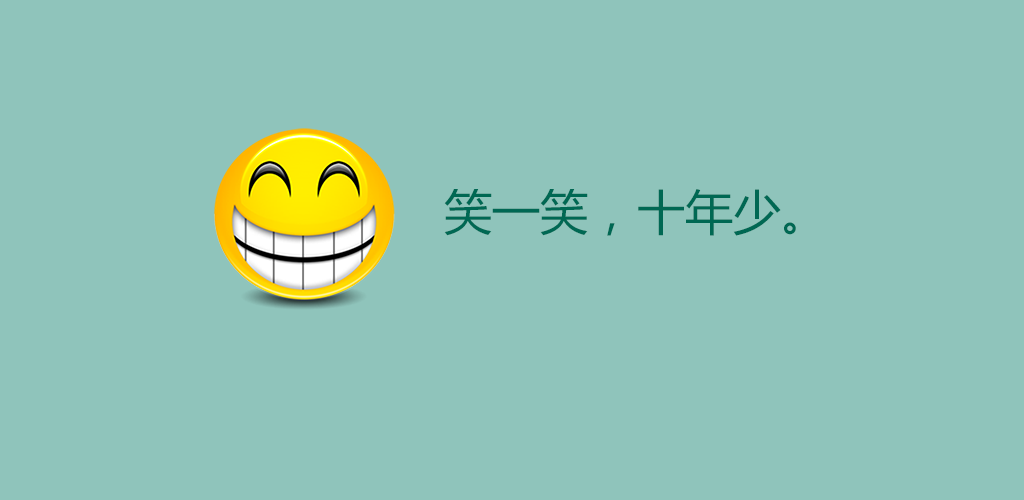
<style>
.page{position:relative;width:1024px;height:500px;background:#8fc4bb}
.page>*{position:absolute;margin:0}
.t1{font:47.9px "MicrosoftYaHei";color:#006853}
</style>
<div class="page">
<p class="t1" style="left:444px;top:189px;width:352px;height:47px">笑一笑，十年少。</p>
</div>
